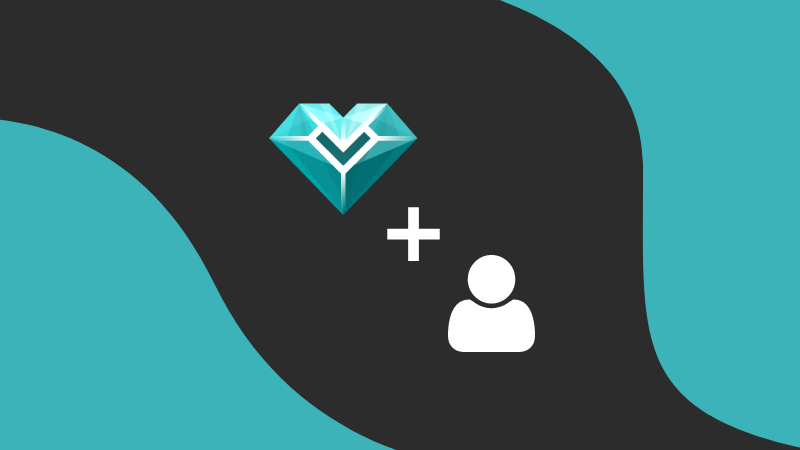
<style>
.page{position:relative;width:800px;height:450px;background:#2c2c2c}
.page>*{position:absolute;margin:0}
.t1{font:145px "Akrobat-SemiBold";color:#ffffff}
</style>
<div class="page">
<p class="t1" style="left:387px;top:207px;width:53px;height:54px">+</p>
</div>
